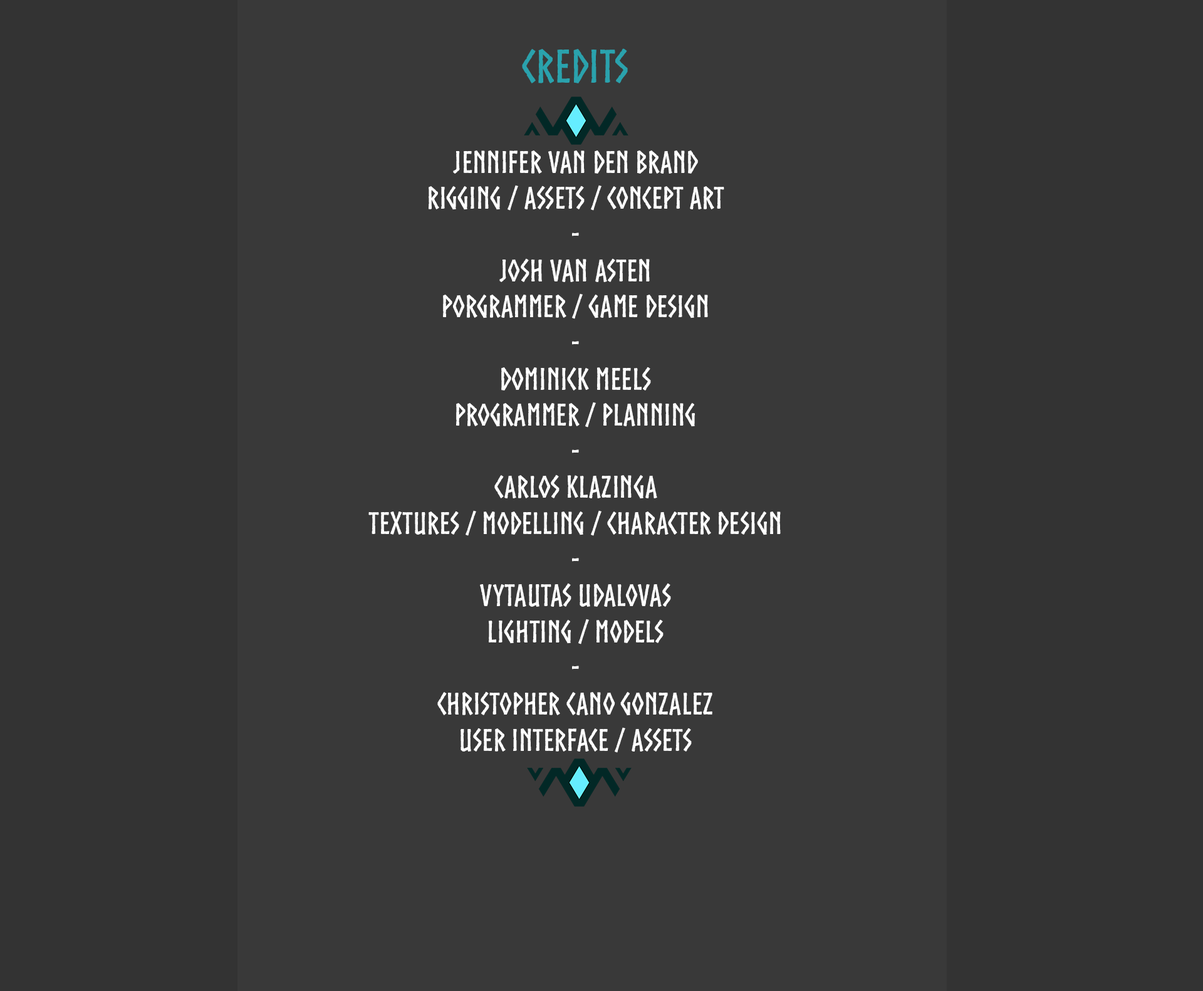
<style>
.page{position:relative;width:1203px;height:991px;background:#393939}
.page>*{position:absolute;margin:0}
.t1{font:30.1px "Norse-Bold";color:#ffffff}
.t2{font:45.1px "Norse-Bold";color:#2aa2ad}
</style>
<div class="page">
<p class="t1" style="left:369px;top:48px;width:412px;height:705px;text-align:center"><span class="t2">Credits<br><br></span>Jennifer van den Brand<br>Rigging / Assets / Concept Art<br>-<br>Josh van asten<br>Porgrammer / Game design<br>-<br>Dominick meels<br>Programmer / Planning<br>-<br>Carlos Klazinga<br>Textures / Modelling / Character Design<br>-<br>Vytautas Udalovas<br>Lighting / Models<br>-<br>Christopher Cano Gonzalez<br>User Interface / Assets</p>
</div>
